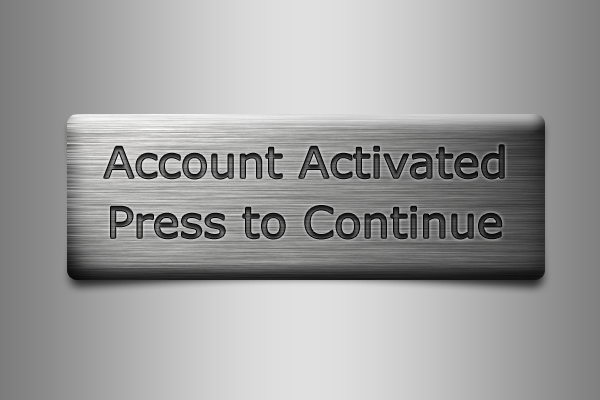
<style>
.page{position:relative;width:600px;height:400px}
.page>*{position:absolute;margin:0}
.t1{font:42.8px "Verdana";scale:1.05 1}
</style>
<div class="page">
<p class="t1" style="left:104px;top:145px;width:400px;height:34px">Account Activated</p>
<p class="t1" style="left:111px;top:206px;width:391px;height:33px">Press to Continue</p>
</div>
